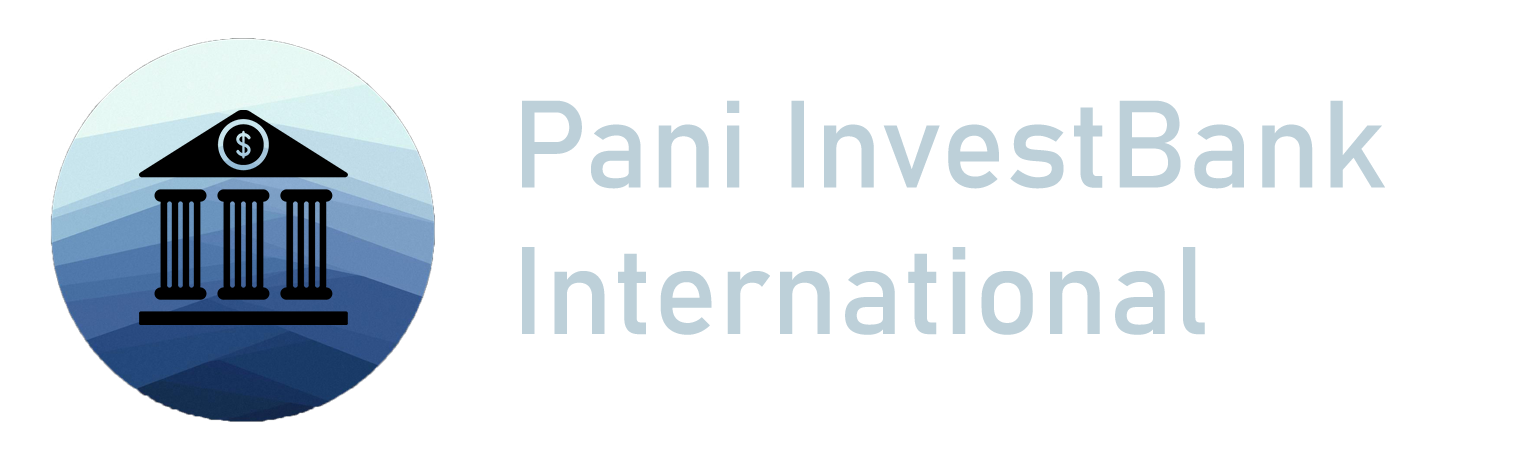
<style>
.page{position:relative;width:1527px;height:466px;background:#ffffff}
.page>*{position:absolute;margin:0}
.t1{font:122px "Bahnschrift";color:#bdd0d9}
</style>
<div class="page">
<p class="t1" style="left:522px;top:100px;width:863px;height:235px">Pani InvestBank<br>International</p>
</div>
